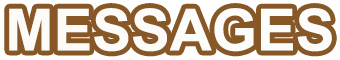
<style>
.page{position:relative;width:340px;height:60px;background:#875826}
.page>*{position:absolute;margin:0}
.t1{font:58px "Arial-BoldMT";color:#ffffff}
</style>
<div class="page">
<p class="t1" style="left:9px;top:8px;width:323px;height:44px">MESSAGES</p>
</div>
